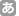
<style>
.page{position:relative;width:19px;height:16px;background:#999999}
.page>*{position:absolute;margin:0}
.t1{font:13px "HiraKakuProN-W6";color:#ffffff}
</style>
<div class="page">
<p class="t1" style="left:2px;top:2px;width:12px;height:12px">あ</p>
</div>
